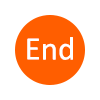
<style>
.page{position:relative;width:100px;height:100px;background:#ffffff}
.page>*{position:absolute;margin:0}
.t1{font:33px "Calibri";color:#ffffff}
</style>
<div class="page">
<p class="t1" style="left:27px;top:37px;width:46px;height:23px">End</p>
</div>
